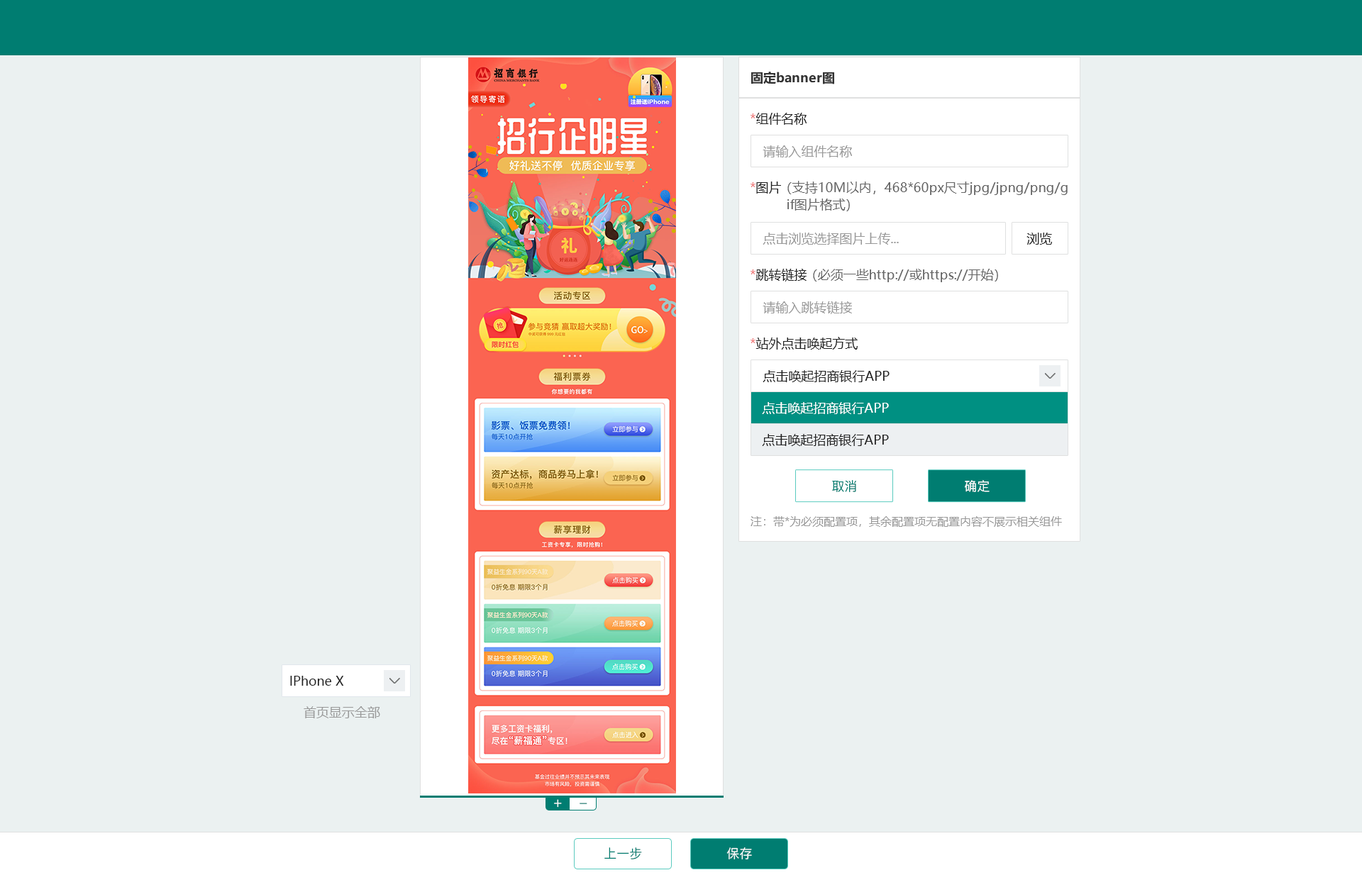
<style>
.page{position:relative;width:1362px;height:875px;background:#ebf1f1}
.page>*{position:absolute;margin:0}
.t1{font:12.8px "MicrosoftYaHei-Bold";color:#333333}
.t2{font:12.8px "MicrosoftYaHei";color:#222222}
.t3{font:12.8px "MicrosoftYaHei";color:#ee7575}
.t4{font:12.8px "MicrosoftYaHei";color:#999999}
.t5{font:12.8px/17px "MicrosoftYaHei";color:#666666}
.t6{font:12.8px "MicrosoftYaHei";color:#666666}
.t7{font:12.8px "MicrosoftYaHei";color:#ffffff}
.t8{font:12.8px "PingFang-SC-Medium";color:#007d71}
.t9{font:12.8px "PingFang-SC-Medium";color:#ffffff}
.t10{font:11.4px "MicrosoftYaHei";color:#999999}
.t11{font:14.2px "PingFang-SC-Medium";color:#ffffff}
.t12{font:14.2px "PingFang-SC-Medium"}
</style>
<div class="page">
<p class="t1" style="left:751px;top:72px;width:83px;height:12px">固定banner图</p>
<p class="t2" style="left:751px;top:113px;width:56px;height:12px"><span class="t3">*</span>组件名称</p>
<p class="t4" style="left:763px;top:145px;width:89px;height:12px">请输入组件名称</p>
<p class="t2" style="left:751px;top:182px;width:30px;height:12px"><span class="t3">*</span>图片</p>
<p class="t5" style="left:787px;top:181px;width:281px;height:30px">（支持10M以内，468*60px尺寸jpg/jpng/png/g<br>  if图片格式）</p>
<p class="t4" style="left:763px;top:233px;width:136px;height:12px">点击浏览选择图片上传...</p>
<p class="t2" style="left:1027px;top:233px;width:25px;height:12px">浏览</p>
<p class="t2" style="left:751px;top:269px;width:56px;height:13px"><span class="t3">*</span>跳转链接</p>
<p class="t6" style="left:813px;top:269px;width:185px;height:13px">（必须一些http://或https://开始）</p>
<p class="t4" style="left:763px;top:302px;width:89px;height:12px">请输入跳转链接</p>
<p class="t2" style="left:751px;top:337px;width:107px;height:13px"><span class="t3">*</span>站外点击唤起方式</p>
<p class="t2" style="left:763px;top:370px;width:127px;height:12px">点击唤起招商银行APP</p>
<p class="t7" style="left:762px;top:402px;width:127px;height:12px">点击唤起招商银行APP</p>
<p class="t2" style="left:762px;top:434px;width:127px;height:12px">点击唤起招商银行APP</p>
<p class="t8" style="left:832px;top:480px;width:24px;height:12px">取消</p>
<p class="t9" style="left:965px;top:480px;width:25px;height:12px">确定</p>
<p class="t10" style="left:751px;top:516px;width:311px;height:11px">注：带*为必须配置项，其余配置项无配置内容不展示相关组件</p>
<p class="t2" style="left:290px;top:676px;width:54px;height:10px">IPhone X</p>
<p class="t4" style="left:304px;top:707px;width:76px;height:12px">首页显示全部</p>
<p class="t11" style="left:554px;top:800px;width:8px;height:8px">+</p>
<p class="t12" style="left:580px;top:803px;width:7px;height:1px">_</p>
<p class="t8" style="left:604px;top:848px;width:38px;height:12px">上一步</p>
<p class="t9" style="left:726px;top:848px;width:26px;height:12px">保存</p>
</div>
